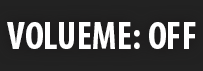
<style>
.page{position:relative;width:203px;height:71px;background:#212121}
.page>*{position:absolute;margin:0}
.t1{font:39px "MyriadPro-BoldCond";color:#ffffff}
</style>
<div class="page">
<p class="t1" style="left:7px;top:22px;width:189px;height:27px">VOLUEME: OFF</p>
</div>
